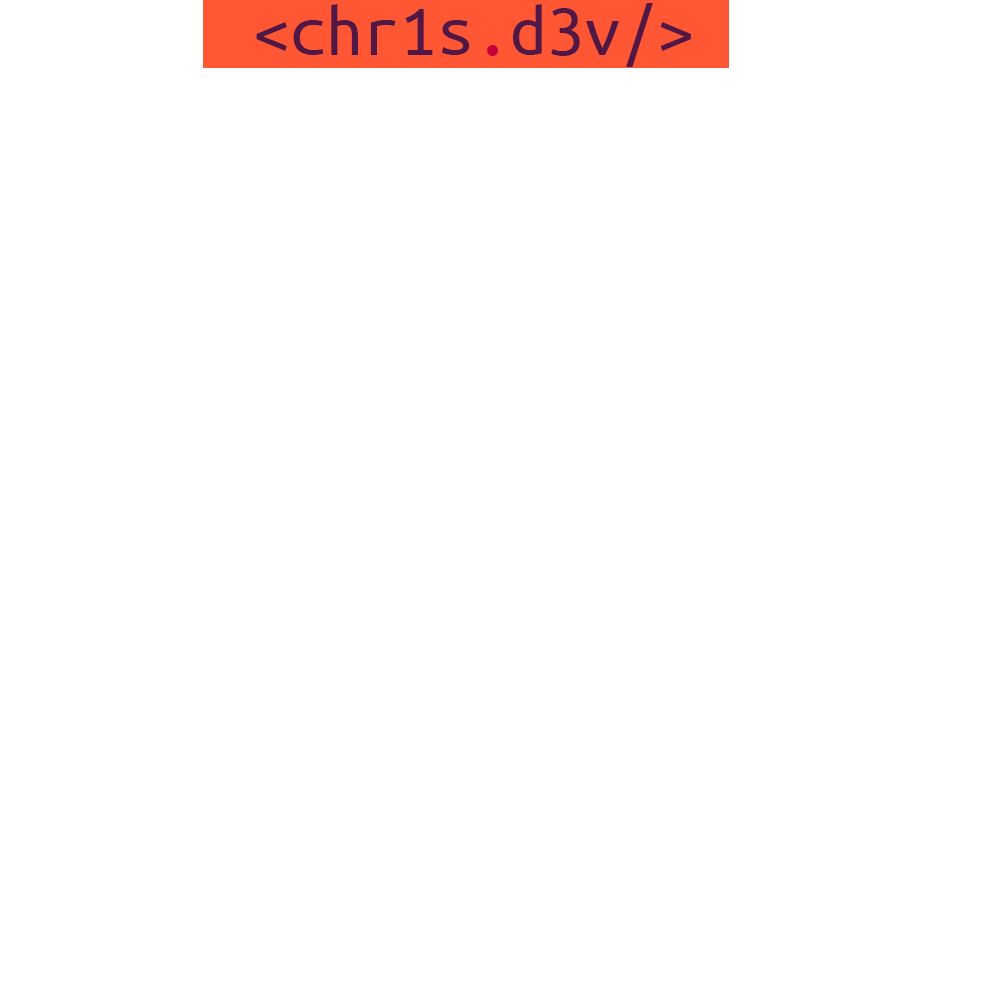
<style>
.page{position:relative;width:1000px;height:1000px;background:#ffffff}
.page>*{position:absolute;margin:0}
.t1{font:73.6px "UbuntuMono-Regular";color:#511845}
.t2{font:73.6px "UbuntuMono-Regular";color:#c70039}
</style>
<div class="page">
<p class="t1" style="left:256px;top:3px;width:435px;height:64px">&lt;chr1s<span class="t2">.</span>d3v/&gt;</p>
</div>
